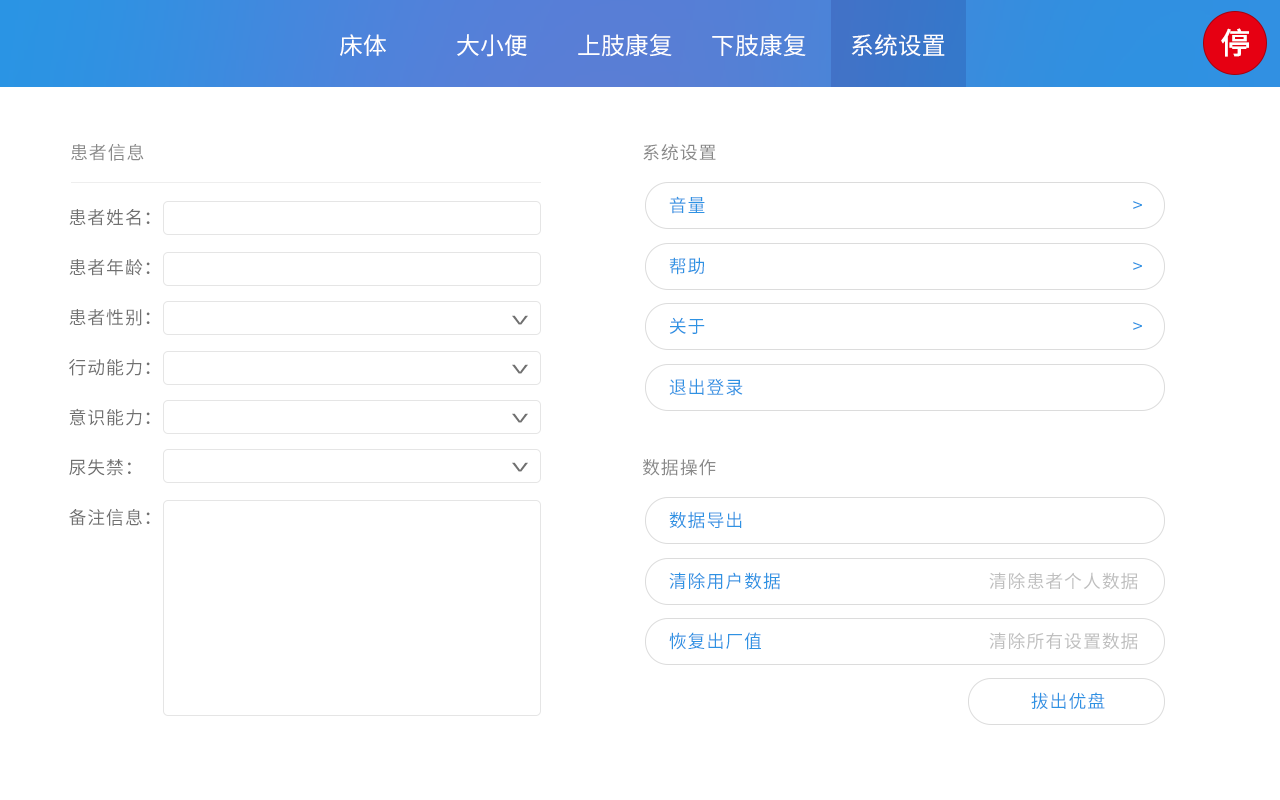
<style>
.page{position:relative;width:1280px;height:800px;background:#ffffff}
.page>*{position:absolute;margin:0}
.t1{font:29.9px "SourceHanSansCN-Medium";color:#ffffff}
.t2{font:23.9px "SourceHanSansCN-Regular";color:#ffffff}
.t3{font:17.9px "SourceHanSansCN-Regular";letter-spacing:0.05em;color:#898989}
.t4{font:17.9px "SourceHanSansCN-Regular";letter-spacing:0.05em;color:#2e92e3}
.t5{font:17.9px/50px "SourceHanSansCN-Regular";letter-spacing:0.05em;color:#707070}
.t6{font:35.8px "SourceHanSansCN-Regular";letter-spacing:0.05em;color:#707070;scale:0.5 1}
.t7{font:17.9px "SourceHanSansCN-Regular";letter-spacing:0.05em;color:#bfbfbf}
</style>
<div class="page">
<p class="t1" style="left:1221px;top:28px;width:28px;height:29px">停</p>
<p class="t2" style="left:340px;top:34px;width:46px;height:22px">床体</p>
<p class="t2" style="left:457px;top:34px;width:70px;height:23px">大小便</p>
<p class="t2" style="left:578px;top:34px;width:94px;height:23px">上肢康复</p>
<p class="t2" style="left:712px;top:34px;width:94px;height:23px">下肢康复</p>
<p class="t2" style="left:851px;top:34px;width:94px;height:22px">系统设置</p>
<p class="t3" style="left:71px;top:143px;width:73px;height:18px">患者信息</p>
<p class="t3" style="left:643px;top:144px;width:73px;height:17px">系统设置</p>
<p class="t4" style="left:669px;top:196px;width:36px;height:18px">音量</p>
<p class="t5" style="left:69px;top:209px;width:81px;height:317px">患者姓名：<br>患者年龄：<br>患者性别：<br>行动能力：<br>意识能力：<br>尿失禁：<br>备注信息：</p>
<p class="t4" style="left:1133px;top:201px;width:9px;height:8px">&gt;</p>
<p class="t4" style="left:669px;top:257px;width:35px;height:18px">帮助</p>
<p class="t4" style="left:1133px;top:262px;width:9px;height:8px">&gt;</p>
<p class="t6" style="left:512px;top:315px;width:16px;height:10px;rotate:90deg">&gt;</p>
<p class="t4" style="left:669px;top:317px;width:36px;height:17px">关于</p>
<p class="t4" style="left:1133px;top:322px;width:9px;height:8px">&gt;</p>
<p class="t6" style="left:512px;top:364px;width:16px;height:10px;rotate:90deg">&gt;</p>
<p class="t4" style="left:669px;top:378px;width:74px;height:18px">退出登录</p>
<p class="t6" style="left:512px;top:413px;width:16px;height:10px;rotate:90deg">&gt;</p>
<p class="t6" style="left:512px;top:462px;width:16px;height:10px;rotate:90deg">&gt;</p>
<p class="t3" style="left:643px;top:459px;width:73px;height:17px">数据操作</p>
<p class="t4" style="left:669px;top:511px;width:73px;height:18px">数据导出</p>
<p class="t4" style="left:669px;top:572px;width:111px;height:18px">清除用户数据</p>
<p class="t7" style="left:989px;top:572px;width:149px;height:18px">清除患者个人数据</p>
<p class="t4" style="left:669px;top:632px;width:92px;height:18px">恢复出厂值</p>
<p class="t7" style="left:989px;top:632px;width:149px;height:18px">清除所有设置数据</p>
<p class="t4" style="left:1031px;top:692px;width:74px;height:18px">拔出优盘</p>
</div>
